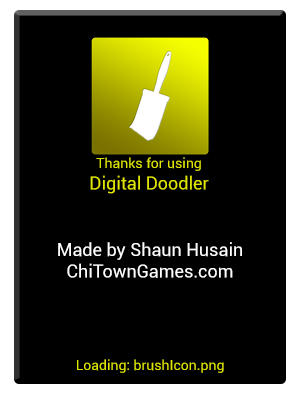
<style>
.page{position:relative;width:300px;height:400px;background:#000000}
.page>*{position:absolute;margin:0}
.t1{font:14px "Roboto-Regular";color:#dfe500}
.t2{font:18px "Roboto-Regular";color:#dfe500}
.t3{font:18px "Roboto-Regular";color:#ffffff}
</style>
<div class="page">
<p class="t1" style="left:90px;top:157px;width:119px;height:37px;text-align:center">Thanks for using<br><span class="t2">Digital Doodler</span></p>
<p class="t3" style="left:58px;top:242px;width:184px;height:36px;text-align:center">Made by Shaun Husain<br>ChiTownGames.com</p>
<p class="t1" style="left:77px;top:359px;width:147px;height:14px">Loading: brushIcon.png</p>
</div>
